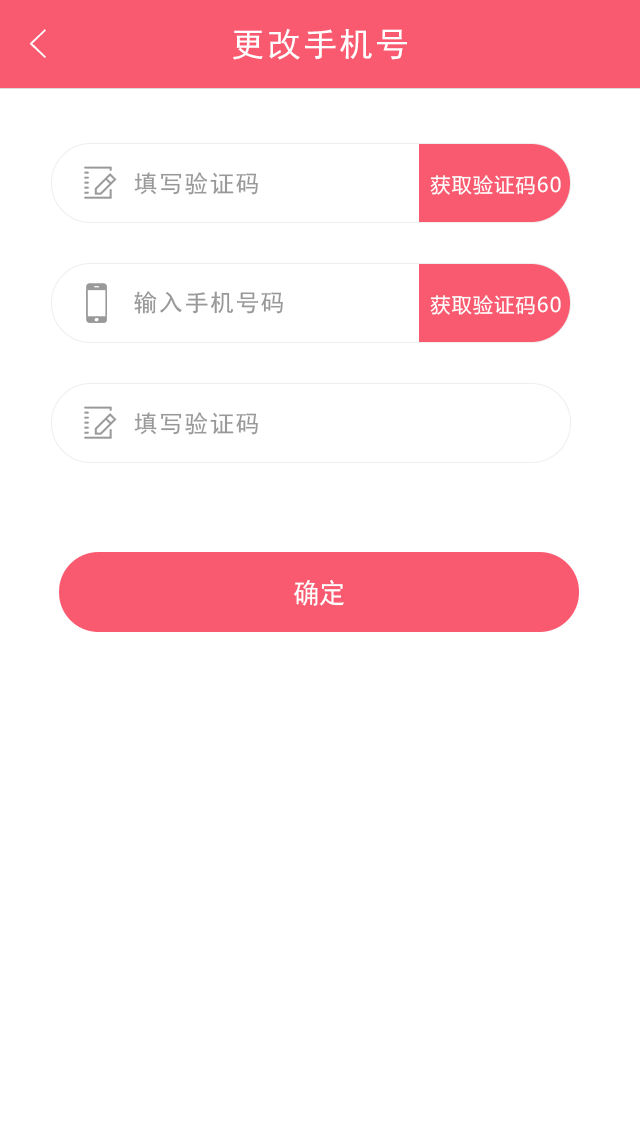
<style>
.page{position:relative;width:640px;height:1136px;background:#ffffff}
.page>*{position:absolute;margin:0}
.t1{font:40px "FZYXJW--GB1-0";color:#ffffff}
.t2{font:34px "SimHei";letter-spacing:0.06em;color:#ffffff}
.t3{font:34px "AdobeHeitiStd-Regular"}
.t4{font:24px "SimHei";letter-spacing:0.06em;color:#999999}
.t5{font:20px "MicrosoftYaHei";letter-spacing:0.06em;color:#ffffff}
.t6{font:28px "SimHei";color:#ffffff;scale:0.94 1}
</style>
<div class="page">
<p class="t1" style="left:29px;top:29px;width:17px;height:29px">&lt;</p>
<p class="t2" style="left:233px;top:28px;width:174px;height:32px">更改手机号</p>
<p class="t3" style="left:236px;top:28px;width:169px;height:32px">更改手机号</p>
<p class="t4" style="left:134px;top:172px;width:124px;height:23px">填写验证码</p>
<p class="t5" style="left:430px;top:175px;width:131px;height:20px">获取验证码60</p>
<p class="t4" style="left:134px;top:291px;width:149px;height:23px">输入手机号码</p>
<p class="t5" style="left:430px;top:295px;width:131px;height:20px">获取验证码60</p>
<p class="t4" style="left:134px;top:412px;width:124px;height:23px">填写验证码</p>
<p class="t6" style="left:293px;top:579px;width:51px;height:27px">确定</p>
</div>
